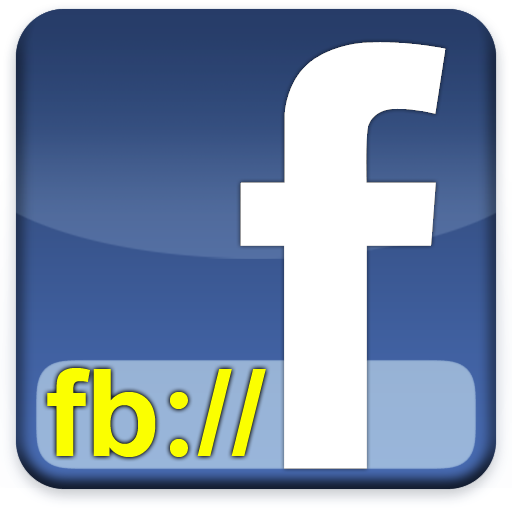
<style>
.page{position:relative;width:512px;height:512px}
.page>*{position:absolute;margin:0}
.t1{font:121px "Arial-BoldMT";color:#fbff00}
.t2{font:121px "ArialRoundedMTBold";color:#fbff00}
</style>
<div class="page">
<p class="t1" style="left:47px;top:368px;width:219px;height:89px">fb<span class="t2">:</span>//</p>
</div>
